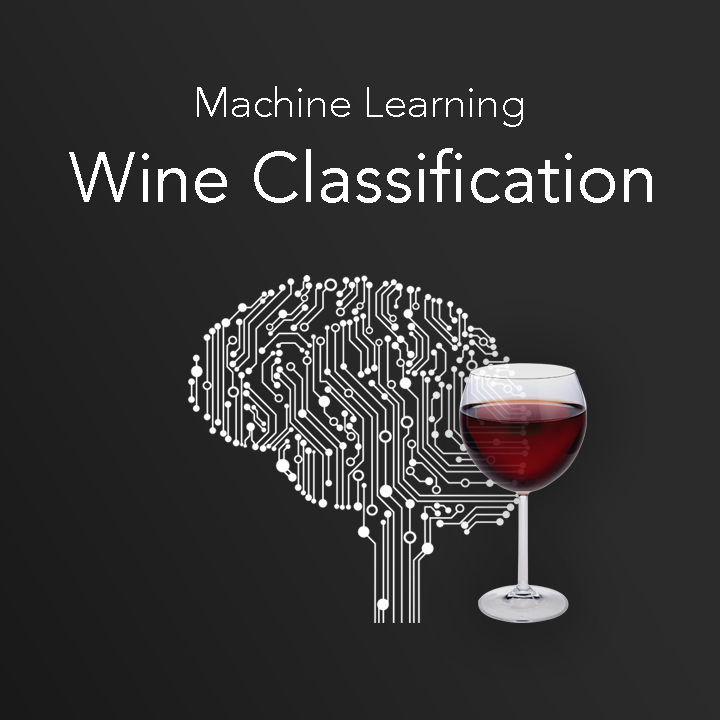
<style>
.page{position:relative;width:720px;height:720px;background:#2b2b2b}
.page>*{position:absolute;margin:0}
.t1{font:72px "Avenir-Light";color:#ffffff}
.t2{font:120px "Avenir-Book";color:#ffffff}
</style>
<div class="page">
<p class="t1" style="left:197px;top:86px;width:326px;height:41px">Machine Learning</p>
<p class="t2" style="left:69px;top:148px;width:583px;height:55px">Wine Classification</p>
</div>
